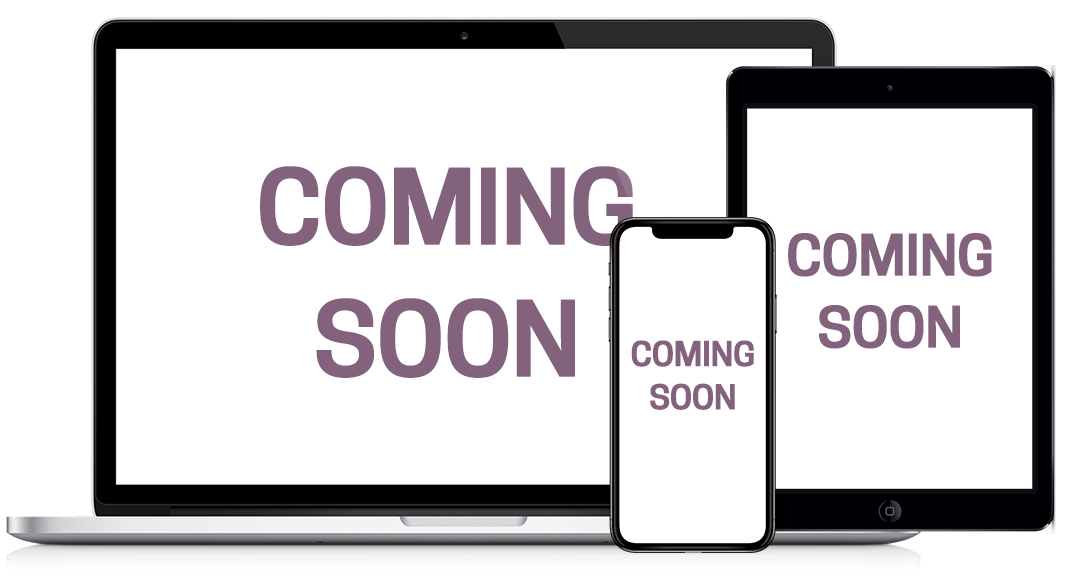
<style>
.page{position:relative;width:1082px;height:575px;background:#ffffff}
.page>*{position:absolute;margin:0}
.t1{font:97.9px "CooperHewitt-Semibold";letter-spacing:-0.04em;color:#82627c;font-weight:bold;scale:1.06 1}
.t2{font:53.4px "CooperHewitt-Semibold";letter-spacing:-0.04em;color:#82627c;font-weight:bold;scale:1.06 1}
.t3{font:32px "CooperHewitt-Semibold";letter-spacing:-0.04em;color:#82627c;font-weight:bold;scale:1.06 1}
</style>
<div class="page">
<p class="t1" style="left:260px;top:166px;width:373px;height:212px;text-align:center">COMING<br>SOON</p>
<p class="t2" style="left:788px;top:233px;width:204px;height:116px;text-align:center">COMING<br>SOON</p>
<p class="t3" style="left:631px;top:340px;width:123px;height:70px;text-align:center">COMING<br>SOON</p>
</div>
